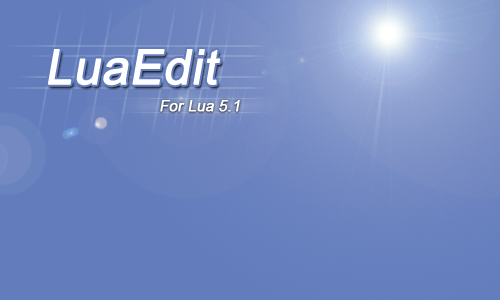
<style>
.page{position:relative;width:500px;height:300px;background:#637cbc}
.page>*{position:absolute;margin:0}
.t1{font:48px "ArialMT";color:#ffffff;font-weight:bold;font-style:italic}
.t2{font:15px "ArialMT";color:#ffffff;font-weight:bold;font-style:italic}
</style>
<div class="page">
<p class="t1" style="left:48px;top:49px;width:173px;height:37px">LuaEdit</p>
<p class="t1" style="left:48px;top:49px;width:173px;height:37px">LuaEdit</p>
<p class="t2" style="left:160px;top:100px;width:80px;height:12px">For Lua 5.1</p>
</div>
